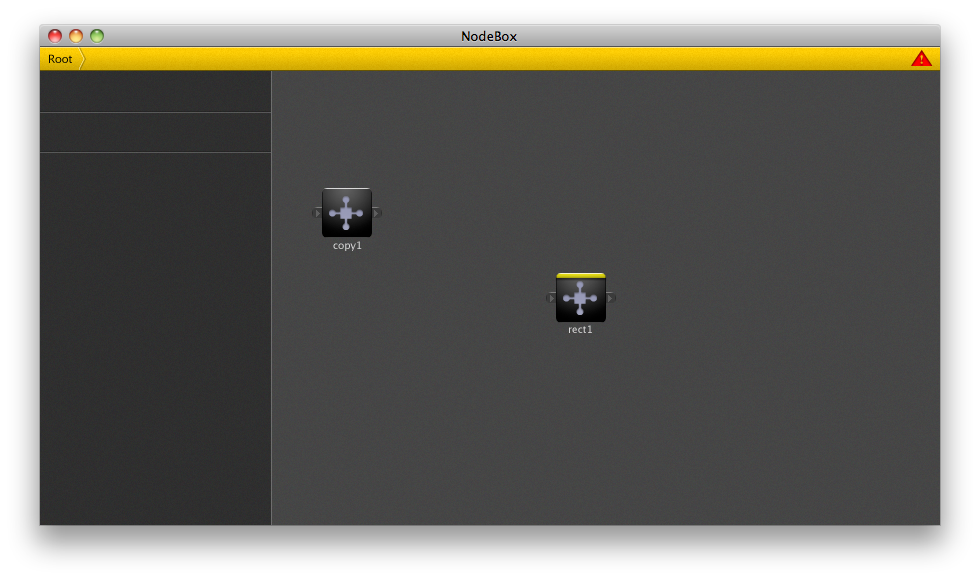
<style>
.page{position:relative;width:980px;height:580px}
.page>*{position:absolute;margin:0}
.t1{font:11px "LucidaGrande";color:#000000}
.t2{font:10px "LucidaGrande";color:#d9dada}
.t3{font:10px "LucidaGrande";color:#dadada}
</style>
<div class="page">
<p class="t1" style="left:49px;top:54px;width:23px;height:9px">Root</p>
<p class="t2" style="left:333px;top:241px;width:29px;height:10px">copy1</p>
<p class="t3" style="left:569px;top:325px;width:23px;height:8px">rect1</p>
</div>
